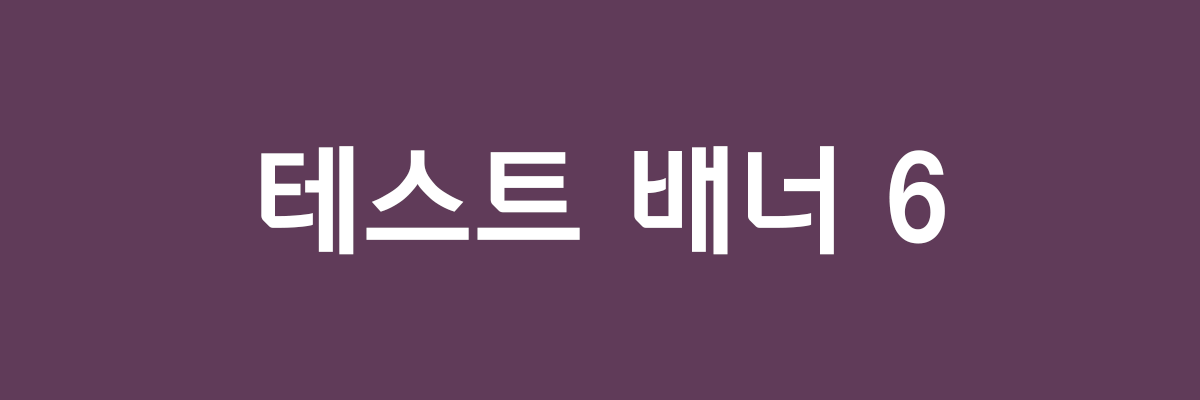
<style>
.page{position:relative;width:1200px;height:400px;background:#603b59}
.page>*{position:absolute;margin:0}
.t1{font:120px "BusanBada";color:#ffffff}
</style>
<div class="page">
<p class="t1" style="left:261px;top:146px;width:684px;height:109px">테스트 배너 6</p>
</div>
